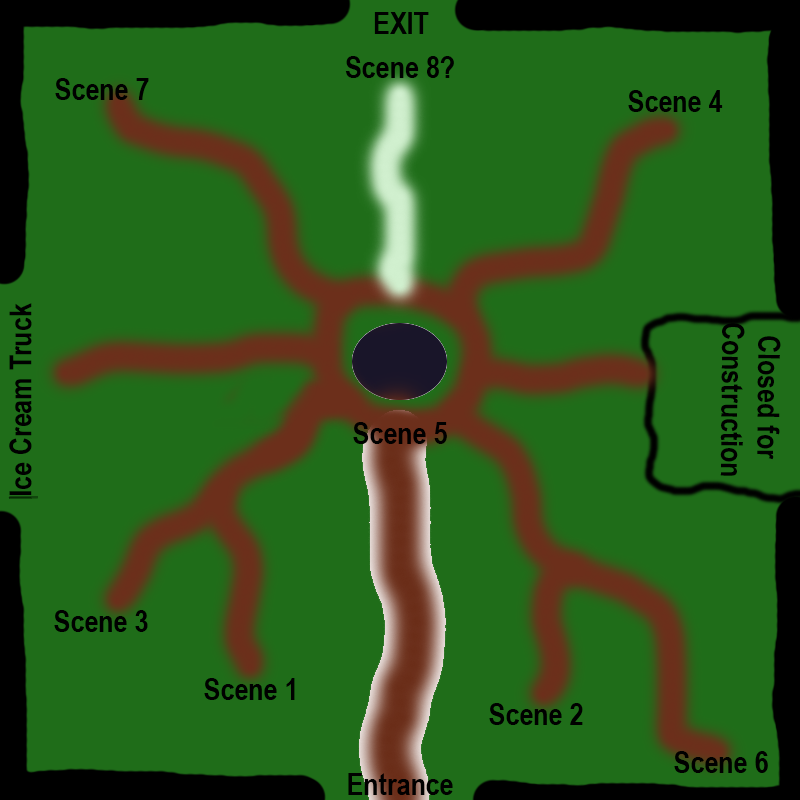
<style>
.page{position:relative;width:800px;height:800px;background:#1f6d19}
.page>*{position:absolute;margin:0}
.t1{font:30.6px "ArialNarrow-Bold";color:#000000}
.t2{font:30.6px "ArialNarrow-Bold";color:#000000;scale:0 1}
.t3{font:30.1px "ArialNarrow-Bold";color:#000000}
</style>
<div class="page">
<p class="t1" style="left:374px;top:12px;width:55px;height:22px">EXIT</p>
<p class="t1" style="left:345px;top:56px;width:109px;height:22px">Scene 8?</p>
<p class="t1" style="left:55px;top:78px;width:94px;height:22px">Scene 7</p>
<p class="t1" style="left:628px;top:90px;width:95px;height:22px">Scene 4</p>
<p class="t2" style="left:8px;top:303px;width:30px;height:196px;rotate:-90deg">fgfgfgfrgdrbgggggg<span class="t1">Ice Cream Truck</span></p>
<p class="t3" style="left:720px;top:323px;width:61px;height:153px;text-align:center;rotate:91deg">Closed for <br>Construction</p>
<p class="t1" style="left:353px;top:422px;width:94px;height:22px">Scene 5</p>
<p class="t1" style="left:54px;top:610px;width:94px;height:22px">Scene 3</p>
<p class="t1" style="left:204px;top:678px;width:91px;height:22px">Scene 1</p>
<p class="t1" style="left:489px;top:703px;width:94px;height:22px">Scene 2</p>
<p class="t1" style="left:674px;top:751px;width:94px;height:22px">Scene 6</p>
<p class="t1" style="left:348px;top:773px;width:105px;height:22px">Entrance</p>
</div>
